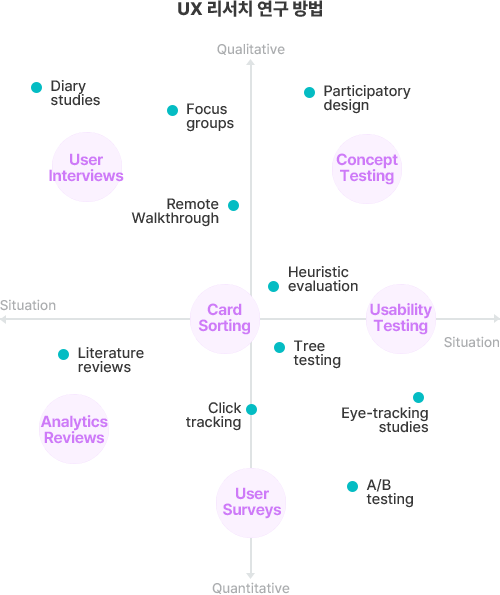
<style>
.page{position:relative;width:500px;height:595px;background:#ffffff}
.page>*{position:absolute;margin:0}
.t1{font:18px "Pretendard-ExtraBold";color:#393939;text-transform:uppercase}
.t2{font:14px "Pretendard-Medium";color:#abadaf}
.t3{font:15px/14px "Pretendard-Medium";color:#373737}
.t4{font:16px/16px "Pretendard-Bold";letter-spacing:-0.025em;color:#ce7af8}
</style>
<div class="page">
<p class="t1" style="left:178px;top:0px;width:144px;height:17px">UX 리서치 연구 방법</p>
<p class="t2" style="left:217px;top:43px;width:68px;height:12px">Qualitative</p>
<p class="t3" style="left:51px;top:80px;width:49px;height:26px">Diary <br>studies</p>
<p class="t3" style="left:324px;top:85px;width:87px;height:29px">Participatory <br>design</p>
<p class="t3" style="left:186px;top:103px;width:48px;height:29px">Focus <br>groups</p>
<p class="t4" style="left:49px;top:153px;width:75px;height:29px;text-align:center">User<br>Interviews</p>
<p class="t4" style="left:336px;top:153px;width:62px;height:32px;text-align:center">Concept<br>Testing</p>
<p class="t3" style="left:131px;top:198px;width:88px;height:29px;text-align:right">Remote<br>Walkthrough</p>
<p class="t3" style="left:288px;top:266px;width:70px;height:26px">Heuristic<br>evaluation</p>
<p class="t2" style="left:0px;top:299px;width:56px;height:12px">Situation</p>
<p class="t4" style="left:198px;top:303px;width:52px;height:32px;text-align:center">Card<br>Sorting</p>
<p class="t4" style="left:370px;top:303px;width:62px;height:32px;text-align:center">Usability<br>Testing</p>
<p class="t3" style="left:293px;top:340px;width:48px;height:29px">Tree<br>testing</p>
<p class="t2" style="left:444px;top:336px;width:55px;height:12px">Situation</p>
<p class="t3" style="left:78px;top:347px;width:66px;height:26px">Literature<br>reviews</p>
<p class="t3" style="left:186px;top:402px;width:56px;height:29px;text-align:right">Click<br>tracking</p>
<p class="t3" style="left:342px;top:407px;width:86px;height:26px;text-align:right">Eye-tracking<br>studies</p>
<p class="t4" style="left:40px;top:415px;width:68px;height:29px;text-align:center">Analytics<br>Reviews</p>
<p class="t3" style="left:366px;top:479px;width:47px;height:29px">A/B <br>testing</p>
<p class="t4" style="left:223px;top:487px;width:58px;height:32px;text-align:center">User<br>Surveys</p>
<p class="t2" style="left:212px;top:582px;width:78px;height:12px">Quantitative</p>
</div>
